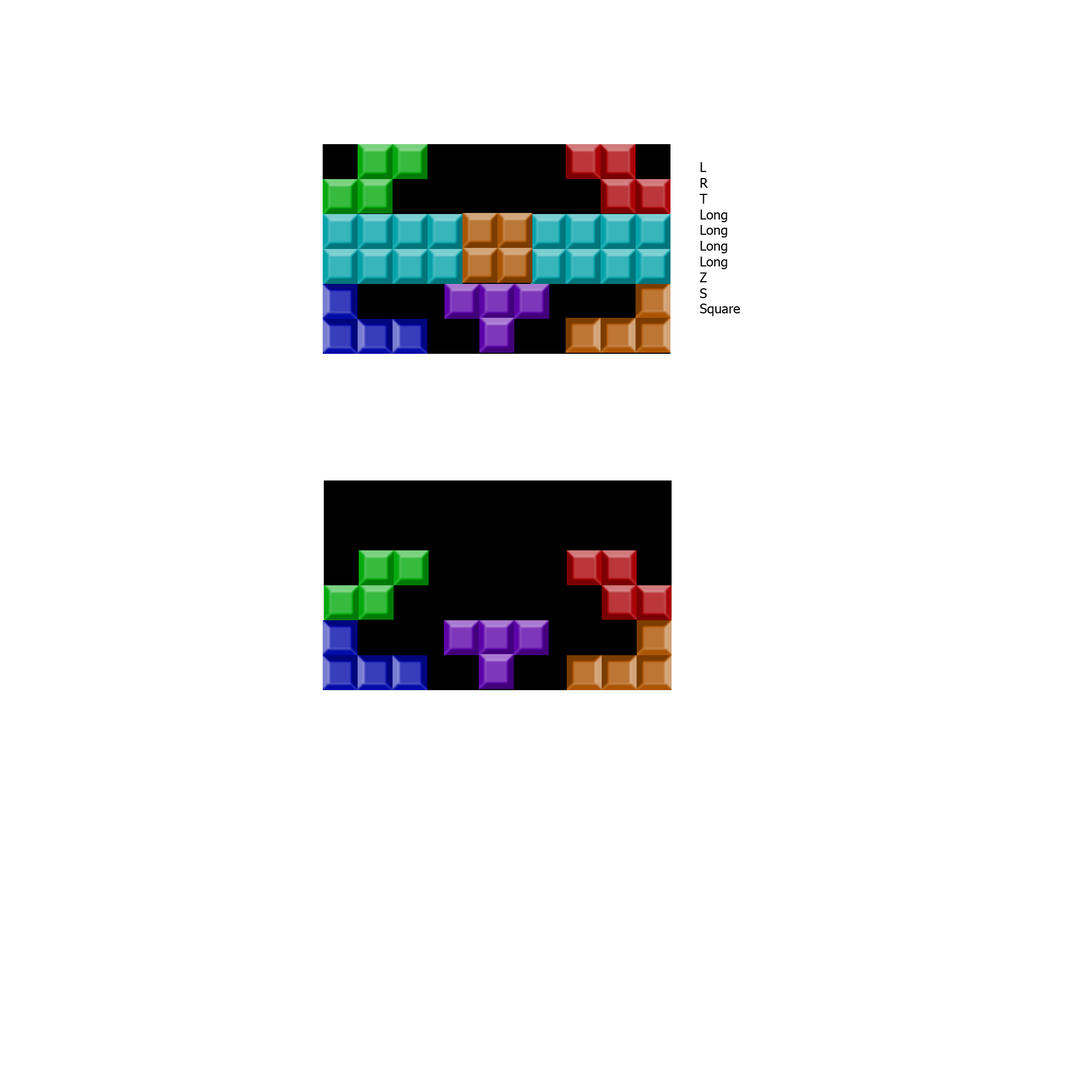
<style>
.page{position:relative;width:1092px;height:1092px;background:#ffffff}
.page>*{position:absolute;margin:0}
.t1{font:13.1px "Tahoma";color:#000000}
</style>
<div class="page">
<p class="t1" style="left:699px;top:162px;width:41px;height:154px">L<br>R<br>T<br>Long<br>Long<br>Long<br>Long<br>Z<br>S<br>Square</p>
</div>
